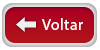
<style>
.page{position:relative;width:100px;height:50px}
.page>*{position:absolute;margin:0}
.t1{font:16px "MyriadPro-Regular";letter-spacing:0.02em;color:#ffffff}
</style>
<div class="page">
<p class="t1" style="left:42px;top:18px;width:41px;height:12px">Voltar</p>
</div>
